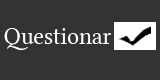
<style>
.page{position:relative;width:160px;height:80px;background:#333333}
.page>*{position:absolute;margin:0}
.t1{font:23.7px "LinuxLibertineG";color:#ffffff}
</style>
<div class="page">
<p class="t1" style="left:4px;top:28px;width:108px;height:22px">Questionar</p>
</div>
